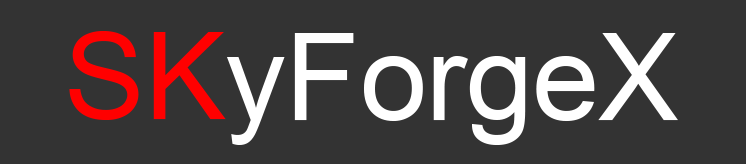
<style>
.page{position:relative;width:746px;height:164px;background:#333333}
.page>*{position:absolute;margin:0}
.t1{font:121.2px "ArialMT";color:#ff0000}
.t2{font:121.2px "ArialMT";color:#ffffff}
</style>
<div class="page">
<p class="t1" style="left:69px;top:31px;width:157px;height:89px">SK</p>
<p class="t2" style="left:227px;top:33px;width:451px;height:112px">yForgeX</p>
</div>
